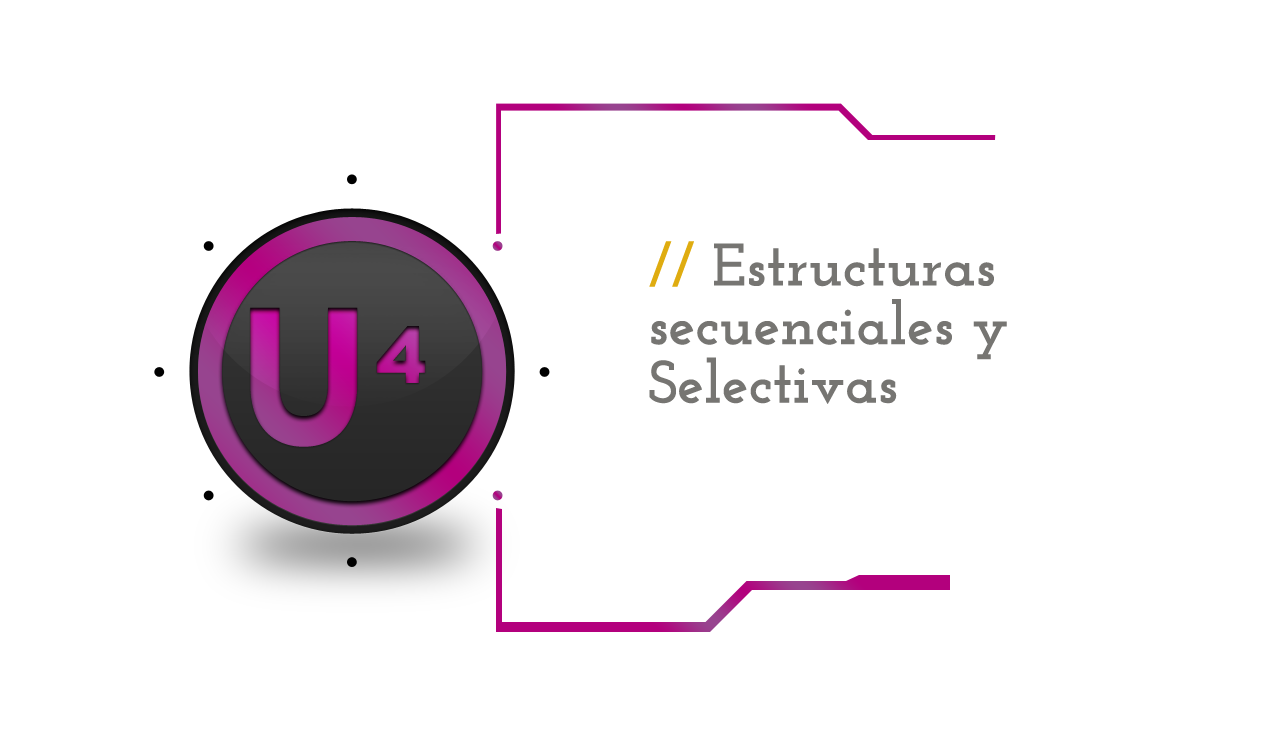
<style>
.page{position:relative;width:1280px;height:756px;background:#ffffff}
.page>*{position:absolute;margin:0}
.t1{font:60px/58.6px "JosefinSlab-Bold";color:#767572}
.t2{font:60px/58.6px "JosefinSlab-Bold";color:#dfac10}
</style>
<div class="page">
<p class="t1" style="left:649px;top:241px;width:358px;height:163px"><span class="t2">//</span> Estructuras<br>secuenciales y <br>Selectivas</p>
</div>
